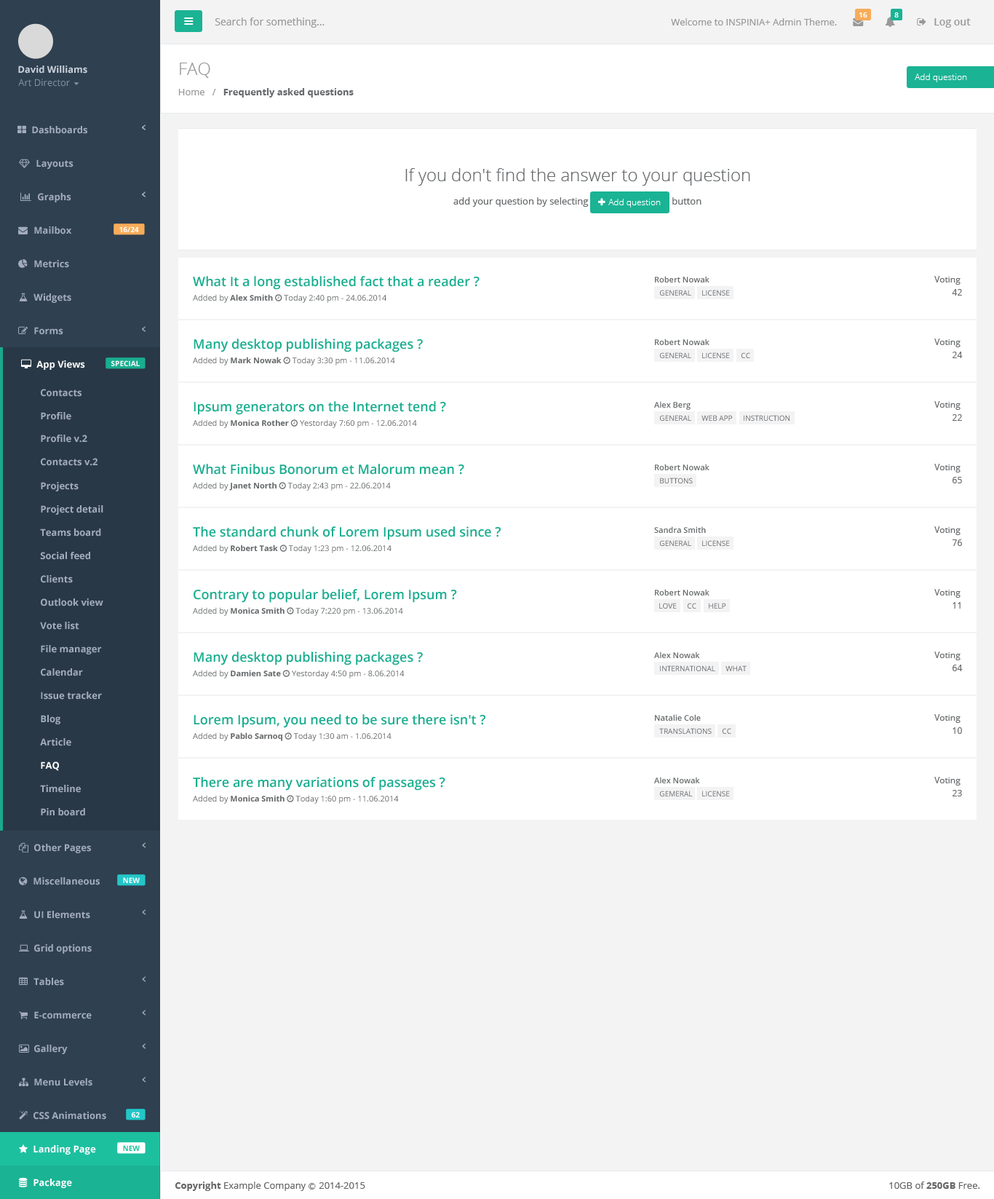
<style>
.page{position:relative;width:994px;height:1199px;background:#ffffff}
.page>*{position:absolute;margin:0}
.t1{font:10.2px "OpenSans";color:#999999}
.t2{font:7.3px "OpenSans-Semibold";color:#ffffff}
.t3{font:9.5px "OpenSans";color:#999999}
.t4{font:10.2px "OpenSans-Semibold";color:#999999}
.t5{font:9.5px "OpenSans-Bold";color:#cad1db}
.t6{font:17.5px "OpenSans-Light";color:#999999}
.t7{font:8.7px "OpenSans-Light";color:#ffffff}
.t8{font:9.5px "OpenSans";color:#7d93a5}
.t9{font:9.5px "OpenSans-Bold";color:#676a6c}
.t10{font:9.5px "OpenSans-Bold";color:#a2acbd}
.t11{font:17.5px "OpenSans-Light";color:#676a6c}
.t12{font:9.5px "OpenSans";color:#676a6c}
.t13{font:7.3px "OpenSans-Bold";color:#fefefe}
.t14{font:13.1px "OpenSans-Semibold";color:#19ad8f}
.t15{font:8px "OpenSans-Semibold";color:#676a6c}
.t16{font:8.7px "OpenSans";color:#676a6c}
.t17{font:7.3px "OpenSans"}
.t18{font:9.5px "OpenSans-Bold";color:#ffffff}
.t19{font:7.3px "OpenSans";color:#676a6c}
.t20{font:7.3px "OpenSans-Bold";color:#1cc09f}
.t21{font:9.5px "OpenSans";color:#666666}
.t22{font:9.5px "OpenSans-Bold";color:#666666}
.t23{font:7.3px "Meiryo";color:#666666}
</style>
<div class="page">
<p class="t1" style="left:215px;top:17px;width:110px;height:11px">Search for something...</p>
<p class="t2" style="left:860px;top:12px;width:8px;height:5px">16</p>
<p class="t2" style="left:895px;top:12px;width:4px;height:5px">8</p>
<p class="t3" style="left:671px;top:18px;width:166px;height:7px">Welcome to INSPINIA+ Admin Theme.</p>
<p class="t4" style="left:935px;top:18px;width:36px;height:10px">Log out</p>
<p class="t5" style="left:18px;top:66px;width:69px;height:8px">David Williams</p>
<p class="t6" style="left:180px;top:63px;width:30px;height:15px">FAQ</p>
<p class="t7" style="left:915px;top:74px;width:53px;height:8px">Add question</p>
<p class="t8" style="left:18px;top:79px;width:52px;height:8px">Art Director</p>
<p class="t9" style="left:178px;top:88px;width:176px;height:10px"><span class="t3">Home   /   </span>Frequently asked questions</p>
<p class="t10" style="left:32px;top:126px;width:55px;height:8px">Dashboards</p>
<p class="t10" style="left:36px;top:159px;width:38px;height:10px">Layouts</p>
<p class="t11" style="left:406px;top:168px;width:345px;height:18px">If you don't find the answer to your question</p>
<p class="t10" style="left:38px;top:193px;width:33px;height:9px">Graphs</p>
<p class="t12" style="left:454px;top:197px;width:248px;height:10px">add your question by selecting                                  button</p>
<p class="t7" style="left:609px;top:199px;width:52px;height:8px">Add question</p>
<p class="t10" style="left:34px;top:226px;width:37px;height:8px">Mailbox</p>
<p class="t13" style="left:119px;top:226px;width:20px;height:6px">16/24</p>
<p class="t10" style="left:34px;top:260px;width:35px;height:8px">Metrics</p>
<p class="t14" style="left:193px;top:276px;width:287px;height:14px">What It a long established fact that a reader ?</p>
<p class="t15" style="left:655px;top:276px;width:55px;height:6px">Robert Nowak</p>
<p class="t16" style="left:935px;top:276px;width:26px;height:9px">Voting</p>
<p class="t10" style="left:33px;top:293px;width:38px;height:10px">Widgets</p>
<p class="t17" style="left:660px;top:290px;width:32px;height:6px">GENERAL</p>
<p class="t17" style="left:703px;top:290px;width:27px;height:6px">LICENSE</p>
<p class="t16" style="left:952px;top:289px;width:10px;height:7px">42</p>
<p class="t10" style="left:34px;top:327px;width:29px;height:8px">Forms</p>
<p class="t14" style="left:194px;top:339px;width:229px;height:13px">Many desktop publishing packages ?</p>
<p class="t15" style="left:655px;top:339px;width:55px;height:6px">Robert Nowak</p>
<p class="t16" style="left:935px;top:339px;width:26px;height:8px">Voting</p>
<p class="t17" style="left:660px;top:352px;width:32px;height:6px">GENERAL</p>
<p class="t17" style="left:703px;top:352px;width:27px;height:6px">LICENSE</p>
<p class="t17" style="left:741px;top:352px;width:10px;height:6px">CC</p>
<p class="t16" style="left:953px;top:352px;width:10px;height:6px">24</p>
<p class="t18" style="left:36px;top:360px;width:49px;height:10px">App Views</p>
<p class="t13" style="left:111px;top:360px;width:29px;height:6px">SPECIAL</p>
<p class="t10" style="left:41px;top:389px;width:41px;height:8px">Contacts</p>
<p class="t14" style="left:194px;top:401px;width:252px;height:14px">Ipsum generators on the Internet tend ?</p>
<p class="t15" style="left:654px;top:401px;width:37px;height:9px">Alex Berg</p>
<p class="t16" style="left:935px;top:401px;width:26px;height:9px">Voting</p>
<p class="t10" style="left:41px;top:412px;width:30px;height:8px">Profile</p>
<p class="t17" style="left:660px;top:415px;width:32px;height:6px">GENERAL</p>
<p class="t19" style="left:702px;top:415px;width:30px;height:6px">WEB APP</p>
<p class="t19" style="left:744px;top:415px;width:46px;height:6px">INSTRUCTION</p>
<p class="t16" style="left:953px;top:414px;width:9px;height:7px">22</p>
<p class="t10" style="left:41px;top:435px;width:46px;height:8px">Profile v.2</p>
<p class="t10" style="left:41px;top:458px;width:57px;height:8px">Contacts v.2</p>
<p class="t14" style="left:193px;top:464px;width:271px;height:11px">What Finibus Bonorum et Malorum mean ?</p>
<p class="t15" style="left:655px;top:464px;width:55px;height:6px">Robert Nowak</p>
<p class="t16" style="left:935px;top:464px;width:26px;height:8px">Voting</p>
<p class="t10" style="left:41px;top:482px;width:38px;height:9px">Projects</p>
<p class="t19" style="left:660px;top:478px;width:33px;height:5px">BUTTONS</p>
<p class="t16" style="left:953px;top:477px;width:9px;height:6px">65</p>
<p class="t10" style="left:41px;top:505px;width:62px;height:10px">Project detail</p>
<p class="t10" style="left:40px;top:529px;width:61px;height:8px">Teams board</p>
<p class="t14" style="left:193px;top:526px;width:308px;height:14px">The standard chunk of Lorem Ipsum used since ?</p>
<p class="t15" style="left:654px;top:526px;width:52px;height:7px">Sandra Smith</p>
<p class="t16" style="left:935px;top:526px;width:26px;height:9px">Voting</p>
<p class="t17" style="left:660px;top:540px;width:32px;height:6px">GENERAL</p>
<p class="t17" style="left:703px;top:540px;width:27px;height:6px">LICENSE</p>
<p class="t16" style="left:952px;top:539px;width:10px;height:7px">76</p>
<p class="t10" style="left:40px;top:552px;width:50px;height:8px">Social feed</p>
<p class="t10" style="left:41px;top:575px;width:32px;height:8px">Clients</p>
<p class="t14" style="left:194px;top:589px;width:263px;height:14px">Contrary to popular belief, Lorem Ipsum ?</p>
<p class="t15" style="left:655px;top:589px;width:55px;height:7px">Robert Nowak</p>
<p class="t16" style="left:935px;top:589px;width:26px;height:9px">Voting</p>
<p class="t10" style="left:41px;top:598px;width:62px;height:8px">Outlook view</p>
<p class="t19" style="left:660px;top:603px;width:17px;height:6px">LOVE</p>
<p class="t17" style="left:687px;top:603px;width:10px;height:6px">CC</p>
<p class="t19" style="left:709px;top:603px;width:17px;height:6px">HELP</p>
<p class="t16" style="left:953px;top:602px;width:8px;height:7px">11</p>
<p class="t10" style="left:40px;top:622px;width:39px;height:8px">Vote list</p>
<p class="t10" style="left:41px;top:645px;width:61px;height:9px">File manager</p>
<p class="t14" style="left:194px;top:652px;width:229px;height:13px">Many desktop publishing packages ?</p>
<p class="t15" style="left:654px;top:652px;width:46px;height:6px">Alex Nowak</p>
<p class="t16" style="left:935px;top:652px;width:26px;height:8px">Voting</p>
<p class="t19" style="left:660px;top:665px;width:56px;height:6px">INTERNATIONAL</p>
<p class="t19" style="left:726px;top:665px;width:21px;height:6px">WHAT</p>
<p class="t16" style="left:953px;top:665px;width:10px;height:6px">64</p>
<p class="t10" style="left:41px;top:668px;width:42px;height:8px">Calendar</p>
<p class="t10" style="left:41px;top:692px;width:61px;height:8px">Issue tracker</p>
<p class="t10" style="left:41px;top:715px;width:19px;height:9px">Blog</p>
<p class="t14" style="left:194px;top:714px;width:292px;height:14px">Lorem Ipsum, you need to be sure there isn't ?</p>
<p class="t15" style="left:655px;top:714px;width:46px;height:7px">Natalie Cole</p>
<p class="t16" style="left:935px;top:714px;width:26px;height:9px">Voting</p>
<p class="t19" style="left:660px;top:728px;width:52px;height:6px">TRANSLATIONS</p>
<p class="t17" style="left:722px;top:728px;width:10px;height:6px">CC</p>
<p class="t16" style="left:953px;top:727px;width:9px;height:7px">10</p>
<p class="t10" style="left:40px;top:738px;width:31px;height:8px">Article</p>
<p class="t18" style="left:41px;top:762px;width:18px;height:9px">FAQ</p>
<p class="t10" style="left:40px;top:785px;width:41px;height:8px">Timeline</p>
<p class="t14" style="left:193px;top:777px;width:253px;height:14px">There are many variations of passages ?</p>
<p class="t15" style="left:654px;top:777px;width:46px;height:6px">Alex Nowak</p>
<p class="t16" style="left:935px;top:777px;width:26px;height:9px">Voting</p>
<p class="t19" style="left:660px;top:791px;width:33px;height:5px">GEMERAL</p>
<p class="t17" style="left:703px;top:791px;width:27px;height:5px">LICENSE</p>
<p class="t16" style="left:953px;top:790px;width:9px;height:6px">23</p>
<p class="t10" style="left:41px;top:808px;width:44px;height:8px">Pin board</p>
<p class="t10" style="left:34px;top:844px;width:57px;height:9px">Other Pages</p>
<p class="t10" style="left:33px;top:877px;width:67px;height:8px">Miscellaneous</p>
<p class="t13" style="left:123px;top:877px;width:17px;height:6px">NEW</p>
<p class="t10" style="left:34px;top:911px;width:56px;height:8px">UI Elements</p>
<p class="t10" style="left:34px;top:944px;width:58px;height:10px">Grid options</p>
<p class="t10" style="left:33px;top:978px;width:31px;height:8px">Tables</p>
<p class="t10" style="left:34px;top:1011px;width:58px;height:8px">E-commerce</p>
<p class="t10" style="left:34px;top:1045px;width:34px;height:9px">Gallery</p>
<p class="t10" style="left:34px;top:1078px;width:58px;height:8px">Menu Levels</p>
<p class="t10" style="left:33px;top:1112px;width:73px;height:8px">CSS Animations</p>
<p class="t13" style="left:131px;top:1112px;width:9px;height:6px">62</p>
<p class="t18" style="left:33px;top:1145px;width:63px;height:10px">Landing Page</p>
<p class="t20" style="left:123px;top:1145px;width:17px;height:6px">NEW</p>
<p class="t18" style="left:33px;top:1179px;width:39px;height:9px">Package</p>
<p class="t21" style="left:175px;top:1182px;width:190px;height:9px"><span class="t22">Copyright</span> Example Company <span class="t23">Ⓒ </span>2014-2015</p>
<p class="t21" style="left:890px;top:1182px;width:91px;height:7px">10GB of <span class="t22">250GB</span> Free.</p>
</div>
